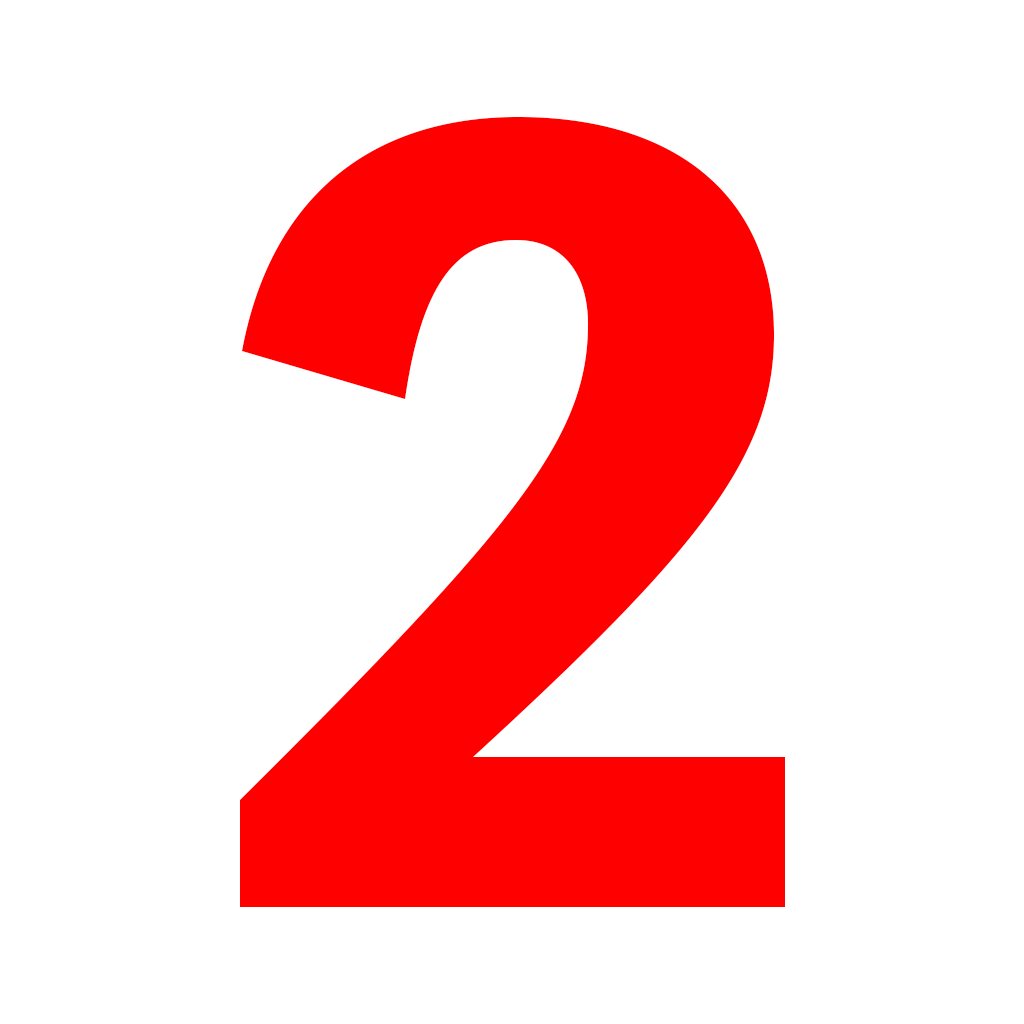
<style>
.page{position:relative;width:1024px;height:1024px;background:#ffffff}
.page>*{position:absolute;margin:0}
.t1{font:1000px "ToppanBunkyuMidashiGothicStdN-ExtraBold";color:#ff0000}
</style>
<div class="page">
<p class="t1" style="left:240px;top:117px;width:545px;height:790px">2</p>
</div>
